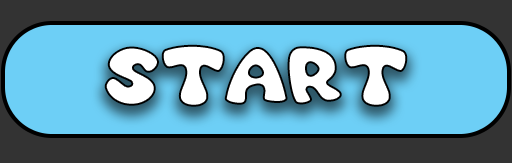
<style>
.page{position:relative;width:512px;height:163px;background:#333333}
.page>*{position:absolute;margin:0}
.t1{font:70.8px "SuperBubble";color:#ffffff;scale:1.05 1}
</style>
<div class="page">
<p class="t1" style="left:104px;top:44px;width:304px;height:63px">START</p>
</div>
